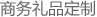
<style>
.page{position:relative;width:97px;height:17px;background:#ffffff}
.page>*{position:absolute;margin:0}
.t1{font:16px "MicrosoftYaHei";color:#666666}
</style>
<div class="page">
<p class="t1" style="left:0px;top:0px;width:95px;height:17px">商务礼品定制</p>
</div>
